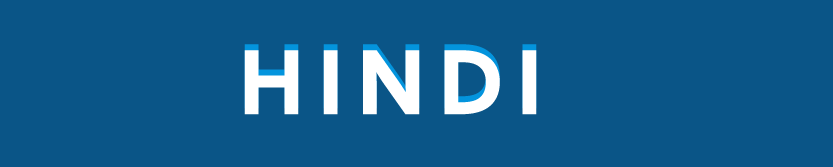
<style>
.page{position:relative;width:833px;height:167px;background:#0a5587}
.page>*{position:absolute;margin:0}
.t1{font:94px "Corbel-Bold";letter-spacing:0.075em;color:#ffffff;text-transform:uppercase;font-weight:bold}
</style>
<div class="page">
<p class="t1" style="left:244px;top:44px;width:293px;height:65px">Hindi</p>
<p class="t1" style="left:244px;top:50px;width:293px;height:65px">Hindi</p>
</div>
